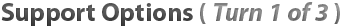
<style>
.page{position:relative;width:345px;height:28px;background:#ffffff}
.page>*{position:absolute;margin:0}
.t1{font:26px "MyriadPro-Bold";color:#464646}
.t2{font:26px "MyriadPro-Bold";color:#898989}
.t3{font:26px "MyriadPro-BoldIt";color:#898989}
</style>
<div class="page">
<p class="t1" style="left:1px;top:2px;width:339px;height:24px">Support Options <span class="t2">( </span><span class="t3">Turn 1 of 3 </span><span class="t2">)</span></p>
</div>
